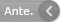
<style>
.page{position:relative;width:61px;height:22px;background:#9c9c9c}
.page>*{position:absolute;margin:0}
.t1{font:11px "Verdana";color:#ffffff}
</style>
<div class="page">
<p class="t1" style="left:4px;top:7px;width:29px;height:8px">Ante.</p>
</div>
